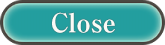
<style>
.page{position:relative;width:165px;height:45px;background:#239e9f}
.page>*{position:absolute;margin:0}
.t1{font:26px "RyuminPro-ExBold";color:#ffffff}
</style>
<div class="page">
<p class="t1" style="left:52px;top:12px;width:63px;height:21px">Close</p>
</div>
